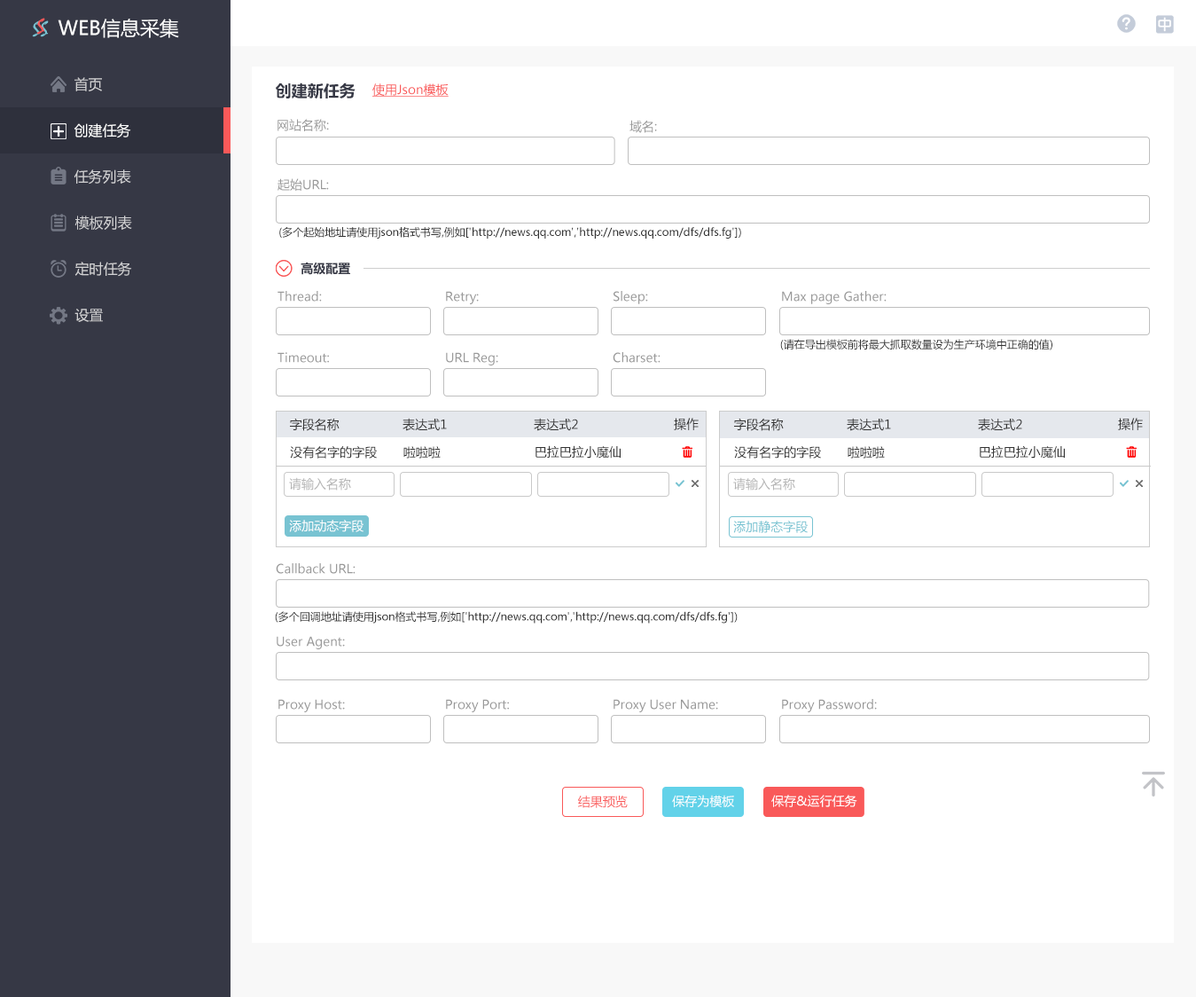
<style>
.page{position:relative;width:1196px;height:997px;background:#ffffff}
.page>*{position:absolute;margin:0}
.t1{font:19.5px "MicrosoftYaHei";color:#ffffff}
.t2{font:14.2px "MicrosoftYaHei";color:#d1d1d3}
.t3{font:16px "MicrosoftYaHei-Bold";color:#363845}
.t4{font:12.4px "MicrosoftYaHei";color:#f95959;text-decoration:underline}
.t5{font:14.2px "MicrosoftYaHei";color:#ffffff}
.t6{font:12.4px "MicrosoftYaHei";color:#999999}
.t7{font:10.6px "MicrosoftYaHei";color:#333333}
.t8{font:12.4px "MicrosoftYaHei-Bold";color:#363845}
.t9{font:12.4px "MicrosoftYaHei";color:#333333}
.t10{font:12.4px "MicrosoftYaHei";color:#b5b5b5}
.t11{font:12.4px "MicrosoftYaHei";color:#ffffff}
.t12{font:12.4px "MicrosoftYaHei";color:#78c3d2}
.t13{font:12.4px "MicrosoftYaHei";color:#f95959}
</style>
<div class="page">
<p class="t1" style="left:58px;top:19px;width:121px;height:19px">WEB信息采集</p>
<p class="t2" style="left:74px;top:77px;width:28px;height:14px">首页</p>
<p class="t3" style="left:276px;top:82px;width:80px;height:17px">创建新任务</p>
<p class="t4" style="left:372px;top:83px;width:77px;height:14px">使用Json模板</p>
<p class="t5" style="left:74px;top:123px;width:57px;height:15px">创建任务</p>
<p class="t6" style="left:278px;top:119px;width:51px;height:12px">网站名称:</p>
<p class="t6" style="left:630px;top:120px;width:27px;height:13px">域名:</p>
<p class="t2" style="left:74px;top:169px;width:57px;height:15px">任务列表</p>
<p class="t6" style="left:278px;top:178px;width:51px;height:13px">起始URL:</p>
<p class="t2" style="left:74px;top:215px;width:58px;height:15px">模板列表</p>
<p class="t7" style="left:279px;top:227px;width:462px;height:12px">(多个起始地址请使用json格式书写,例如['http://news.qq.com','http://news.qq.com/dfs/dfs.fg'])</p>
<p class="t2" style="left:74px;top:262px;width:58px;height:15px">定时任务</p>
<p class="t8" style="left:301px;top:262px;width:49px;height:13px">高级配置</p>
<p class="t6" style="left:278px;top:291px;width:44px;height:11px">Thread:</p>
<p class="t6" style="left:446px;top:291px;width:33px;height:13px">Retry:</p>
<p class="t6" style="left:614px;top:291px;width:34px;height:13px">Sleep:</p>
<p class="t6" style="left:782px;top:291px;width:105px;height:13px">Max page Gather:</p>
<p class="t2" style="left:74px;top:309px;width:29px;height:13px">设置</p>
<p class="t7" style="left:780px;top:339px;width:273px;height:11px">(请在导出模板前将最大抓取数量设为生产环境中正确的值)</p>
<p class="t6" style="left:278px;top:352px;width:51px;height:11px">Timeout:</p>
<p class="t6" style="left:446px;top:352px;width:52px;height:13px">URL Reg:</p>
<p class="t6" style="left:613px;top:352px;width:48px;height:11px">Charset:</p>
<p class="t9" style="left:290px;top:418px;width:50px;height:13px">字段名称</p>
<p class="t9" style="left:403px;top:418px;width:44px;height:13px">表达式1</p>
<p class="t9" style="left:534px;top:418px;width:44px;height:13px">表达式2</p>
<p class="t9" style="left:674px;top:418px;width:25px;height:12px">操作</p>
<p class="t9" style="left:734px;top:418px;width:50px;height:13px">字段名称</p>
<p class="t9" style="left:847px;top:418px;width:44px;height:13px">表达式1</p>
<p class="t9" style="left:978px;top:418px;width:44px;height:13px">表达式2</p>
<p class="t9" style="left:1118px;top:418px;width:25px;height:12px">操作</p>
<p class="t9" style="left:290px;top:446px;width:87px;height:12px">没有名字的字段</p>
<p class="t9" style="left:403px;top:446px;width:38px;height:12px">啦啦啦</p>
<p class="t9" style="left:536px;top:445px;width:85px;height:13px">巴拉巴拉小魔仙</p>
<p class="t9" style="left:734px;top:446px;width:87px;height:12px">没有名字的字段</p>
<p class="t9" style="left:848px;top:446px;width:37px;height:12px">啦啦啦</p>
<p class="t9" style="left:980px;top:445px;width:85px;height:13px">巴拉巴拉小魔仙</p>
<p class="t10" style="left:289px;top:477px;width:62px;height:13px">请输入名称</p>
<p class="t10" style="left:733px;top:477px;width:62px;height:13px">请输入名称</p>
<p class="t11" style="left:289px;top:520px;width:75px;height:12px">添加动态字段</p>
<p class="t12" style="left:733px;top:521px;width:75px;height:12px">添加静态字段</p>
<p class="t6" style="left:276px;top:563px;width:80px;height:11px">Callback URL:</p>
<p class="t7" style="left:275px;top:611px;width:463px;height:12px">(多个回调地址请使用json格式书写,例如['http://news.qq.com','http://news.qq.com/dfs/dfs.fg'])</p>
<p class="t6" style="left:277px;top:636px;width:68px;height:13px">User Agent:</p>
<p class="t6" style="left:278px;top:699px;width:67px;height:13px">Proxy Host:</p>
<p class="t6" style="left:446px;top:699px;width:63px;height:13px">Proxy Port:</p>
<p class="t6" style="left:614px;top:699px;width:104px;height:13px">Proxy User Name:</p>
<p class="t6" style="left:782px;top:699px;width:95px;height:13px">Proxy Password:</p>
<p class="t13" style="left:578px;top:795px;width:50px;height:13px">结果预览</p>
<p class="t11" style="left:672px;top:795px;width:62px;height:12px">保存为模板</p>
<p class="t11" style="left:772px;top:795px;width:86px;height:12px">保存&amp;运行任务</p>
</div>
